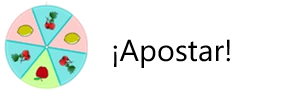
<style>
.page{position:relative;width:300px;height:91px;background:#ffffff}
.page>*{position:absolute;margin:0}
.t1{font:30.3px "SegoeUI";color:#000000}
</style>
<div class="page">
<p class="t1" style="left:113px;top:39px;width:117px;height:29px">¡Apostar!</p>
</div>
